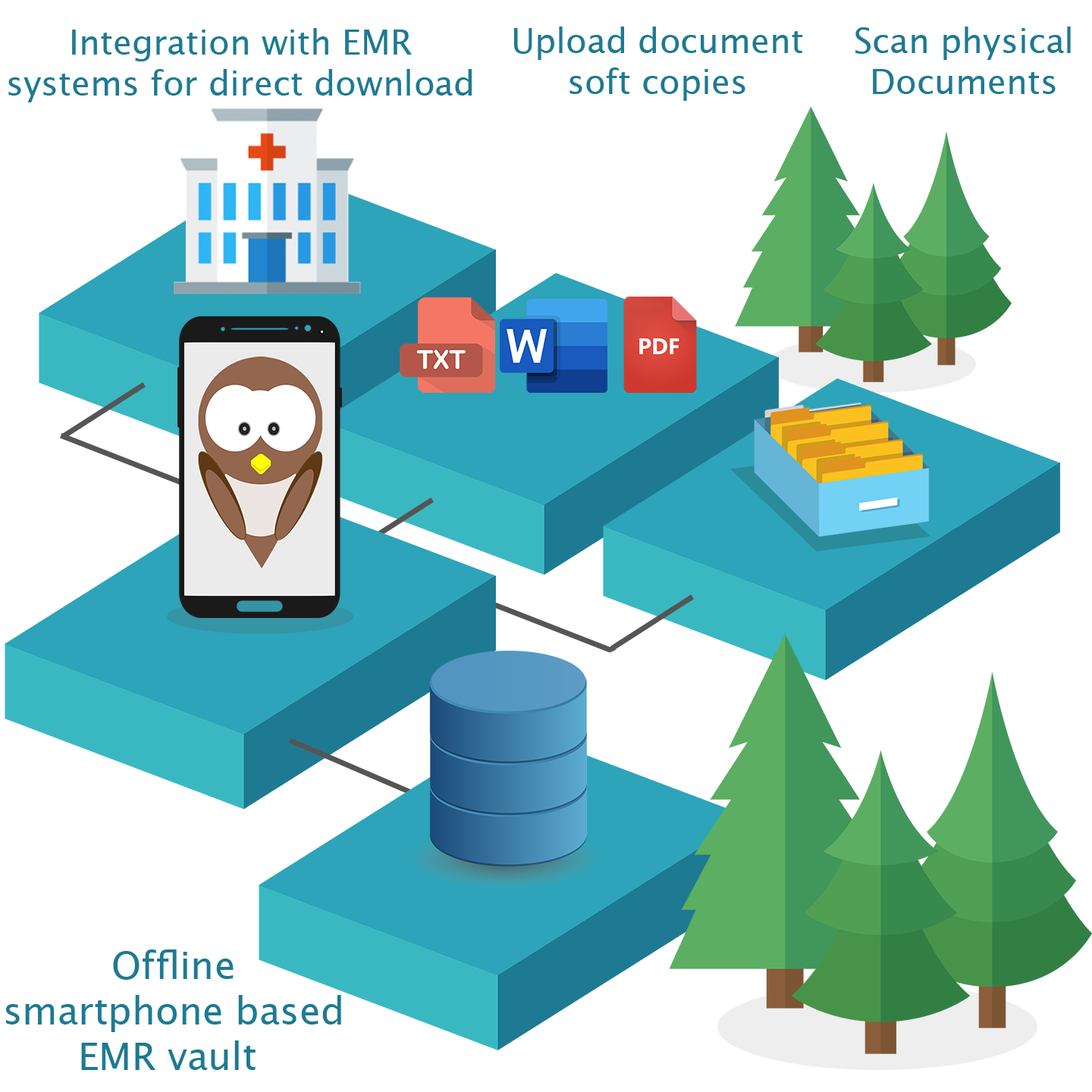
<style>
.page{position:relative;width:1092px;height:1092px;background:#ffffff}
.page>*{position:absolute;margin:0}
.t1{font:34.1px "LucidaSansUnicode";color:#1e7a92}
.t2{font:37.9px "LucidaSansUnicode";color:#1e7a92}
</style>
<div class="page">
<p class="t1" style="left:8px;top:28px;width:464px;height:74px;text-align:center">Integration with EMR<br>systems for direct download</p>
<p class="t1" style="left:513px;top:27px;width:290px;height:74px;text-align:center">Upload document<br>soft copies</p>
<p class="t1" style="left:855px;top:27px;width:216px;height:67px;text-align:center">Scan physical<br>Documents</p>
<p class="t2" style="left:5px;top:949px;width:336px;height:121px;text-align:center">Offline <br>smartphone based <br>EMR vault</p>
</div>
